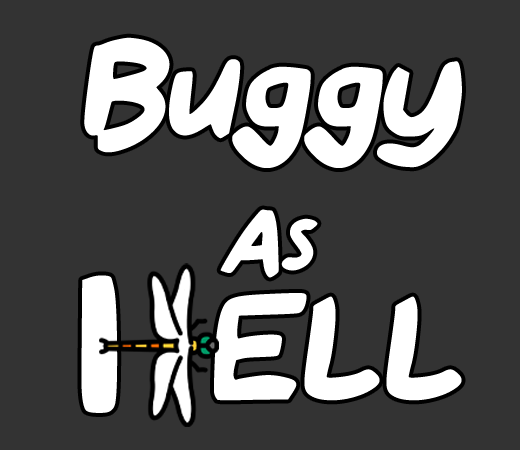
<style>
.page{position:relative;width:520px;height:450px;background:#333333}
.page>*{position:absolute;margin:0}
.t1{font:159.4px/127.5px "QAReports";color:#ffffff;font-style:italic}
.t2{font:95.6px/127.5px "QAReports";color:#ffffff;font-style:italic}
.t3{font:255px "QAReports";color:#ffffff}
</style>
<div class="page">
<p class="t1" style="left:84px;top:37px;width:378px;height:364px;text-align:center">Buggy<br><span class="t2">As<br></span>  ELL</p>
<p class="t3" style="left:81px;top:275px;width:37px;height:138px">I</p>
</div>
